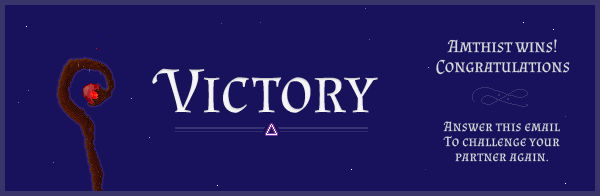
<style>
.page{position:relative;width:600px;height:196px;background:#17125b}
.page>*{position:absolute;margin:0}
.t1{font:18px/20px "AlmendraSC-Regular";color:#d9d9d9}
.t2{font:65.2px "AlmendraSC-Regular";letter-spacing:-0.02em;color:#f5f5f5}
.t3{font:65.2px "AlmendraSC-Regular";letter-spacing:0.06em;color:#f5f5f5}
.t4{font:14px/15px "AlmendraSC-Regular";letter-spacing:0.02em;color:#d9d9d9}
</style>
<div class="page">
<p class="t1" style="left:436px;top:39px;width:134px;height:36px;text-align:center">Amthist wins!<br>Congratulations</p>
<p class="t2" style="left:152px;top:68px;width:226px;height:45px">Vi<span class="t3">c</span>tory</p>
<p class="t4" style="left:443px;top:121px;width:117px;height:41px;text-align:center">Answer this email<br>To challenge your<br>partner again.</p>
</div>
